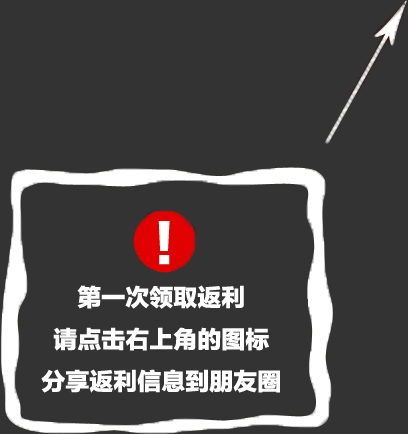
<style>
.page{position:relative;width:408px;height:434px;background:#333333}
.page>*{position:absolute;margin:0}
.t1{font:24px "FZLTTHK--GBK1-0";color:#fefefe}
</style>
<div class="page">
<p class="t1" style="left:41px;top:285px;width:239px;height:108px;text-align:center">第一次领取返利<br>请点击右上角的图标<br>分享返利信息到朋友圈</p>
</div>
